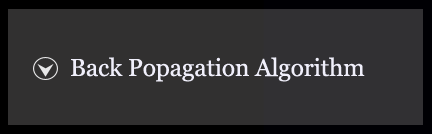
<style>
.page{position:relative;width:432px;height:134px;background:#313030}
.page>*{position:absolute;margin:0}
.t1{font:24.5px "Georgia";letter-spacing:-0.005em;color:#f0effb}
</style>
<div class="page">
<p class="t1" style="left:71px;top:57px;width:294px;height:25px">Back Popagation Algorithm</p>
</div>
